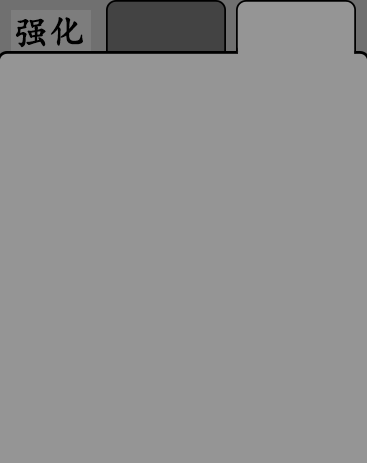
<style>
.page{position:relative;width:367px;height:463px;background:#959595}
.page>*{position:absolute;margin:0}
.t1{font:35.3px "KaiTi";color:#000000;font-weight:bold}
</style>
<div class="page">
<p class="t1" style="left:15px;top:17px;width:68px;height:31px">强化</p>
</div>
